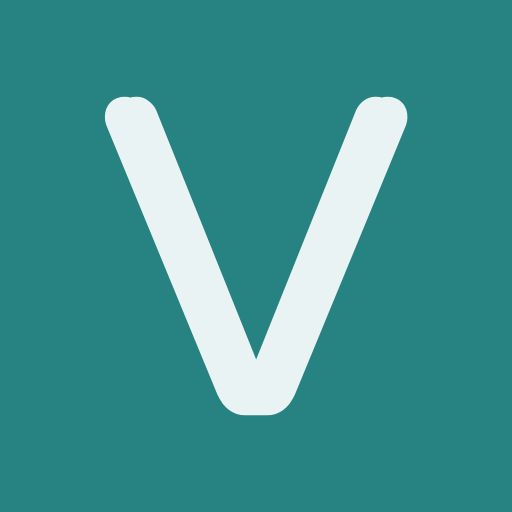
<style>
.page{position:relative;width:512px;height:512px;background:#278282}
.page>*{position:absolute;margin:0}
.t1{font:450px "VarelaRound-Regular";color:#ffffff;font-weight:bold}
</style>
<div class="page">
<p class="t1" style="left:104px;top:96px;width:304px;height:320px;opacity:0.9">V</p>
</div>
